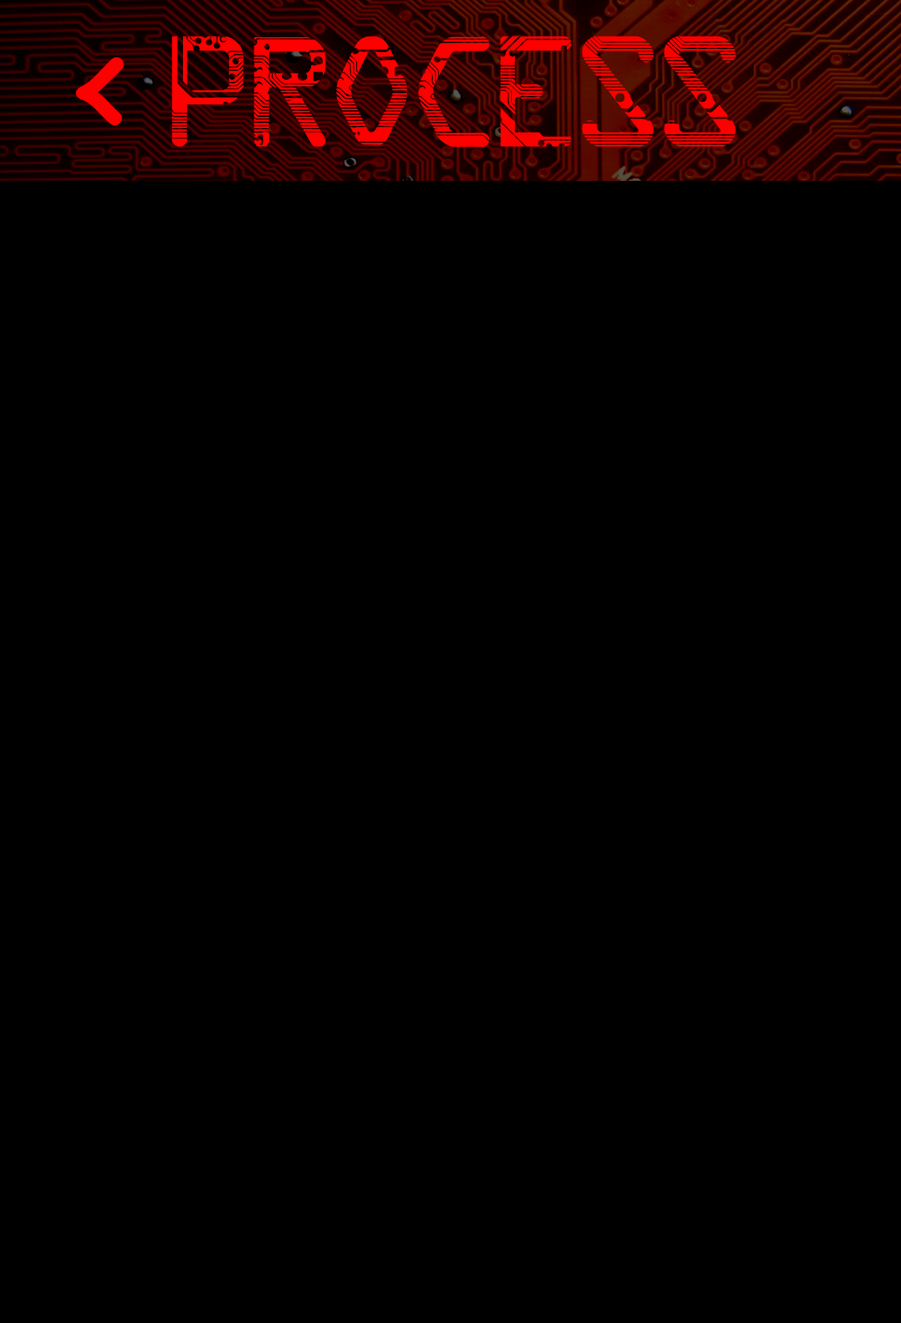
<style>
.page{position:relative;width:901px;height:1323px;background:#000000}
.page>*{position:absolute;margin:0}
.t1{font:160.3px "Circuit";color:#ff0000}
</style>
<div class="page">
<p class="t1" style="left:172px;top:36px;width:564px;height:111px">process</p>
</div>
